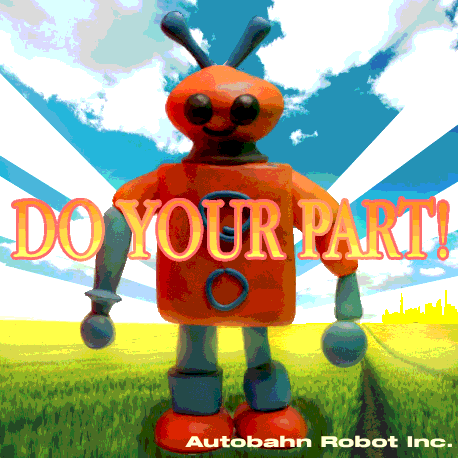
<style>
.page{position:relative;width:458px;height:458px;background:#ffffff}
.page>*{position:absolute;margin:0}
.t1{font:87.1px "AppleGaramond";scale:0.87 1}
.t2{font:16px "MATROSKA";color:#ffffdb}
</style>
<div class="page">
<p class="t1" style="left:13px;top:198px;width:434px;height:61px">DO YOUR PART!</p>
<p class="t2" style="left:185px;top:435px;width:267px;height:13px">Autobahn Robot Inc.</p>
</div>
